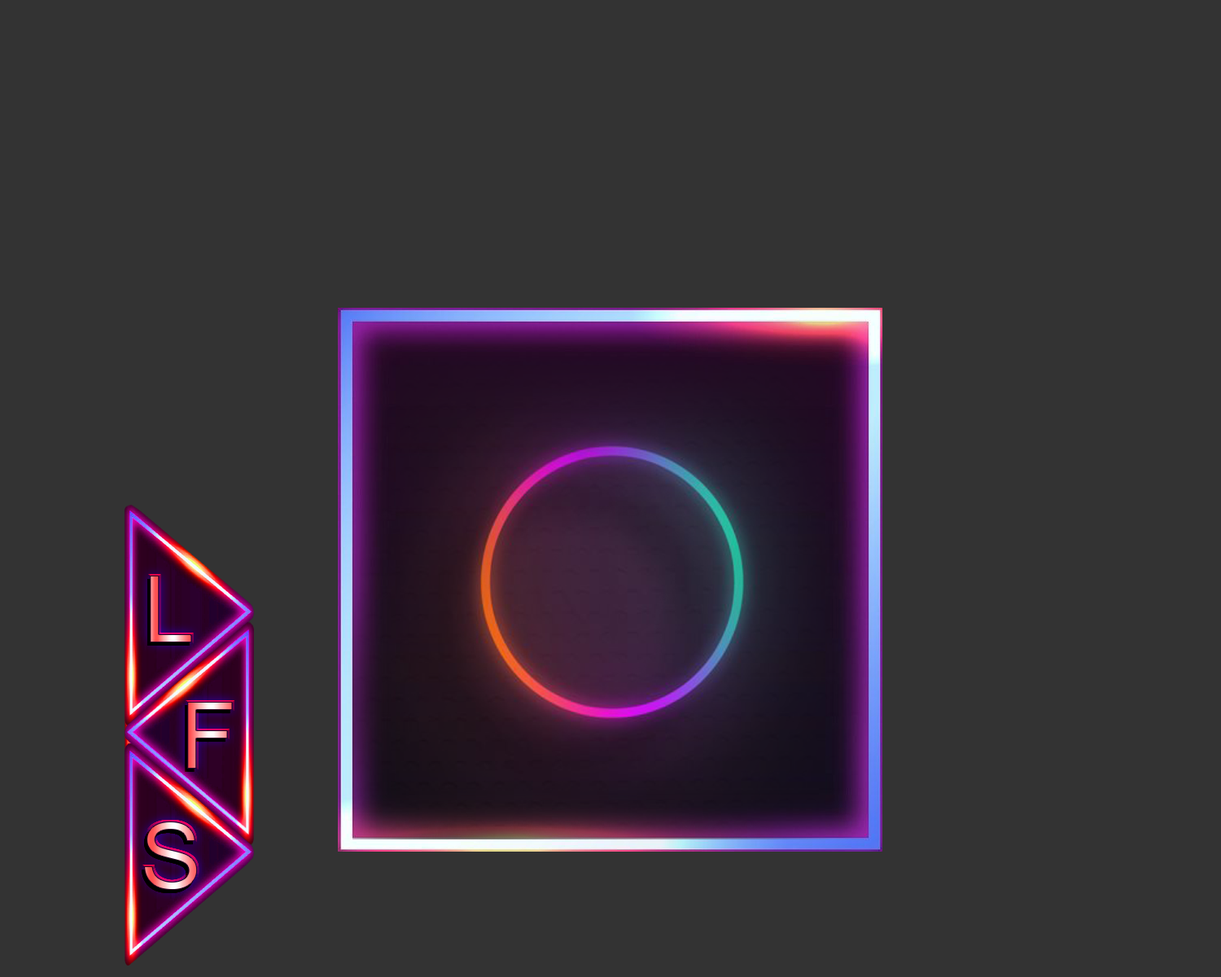
<style>
.page{position:relative;width:1221px;height:977px;background:#333333}
.page>*{position:absolute;margin:0}
.t1{font:93px "ArialMT"}
</style>
<div class="page">
<p class="t1" style="left:187px;top:702px;width:46px;height:66px">F</p>
<p class="t1" style="left:144px;top:821px;width:54px;height:69px">S</p>
</div>
